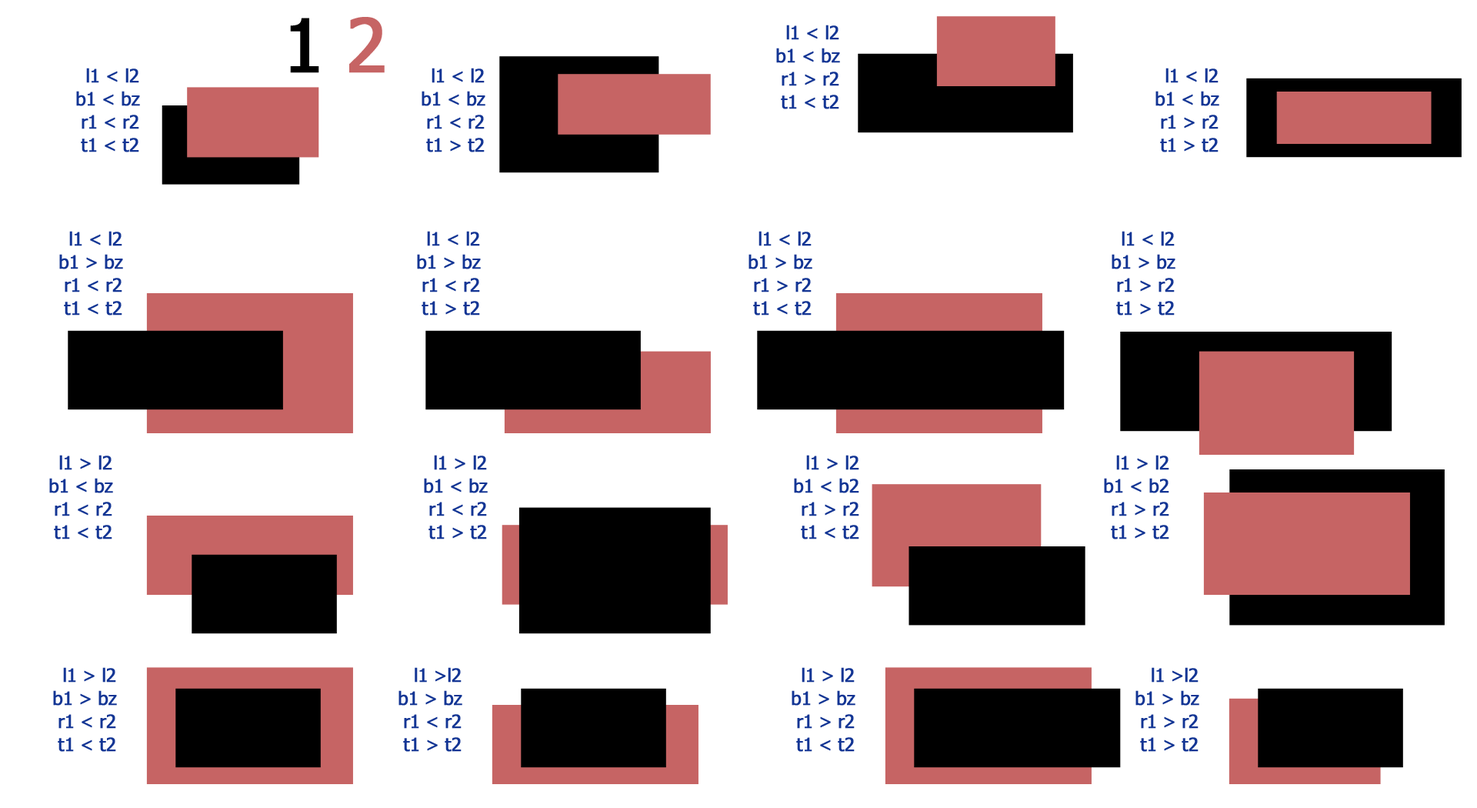
<style>
.page{position:relative;width:1477px;height:808px;background:#ffffff}
.page>*{position:absolute;margin:0}
.t1{font:73.5px "Tahoma";letter-spacing:-0.025em;color:#000000;font-weight:bold}
.t2{font:73.5px "Tahoma";letter-spacing:-0.025em;color:#c66464;font-weight:bold}
.t3{font:18.5px/23.1px "Tahoma";letter-spacing:-0.025em;color:#133594;font-weight:bold}
</style>
<div class="page">
<p class="t1" style="left:290px;top:17px;width:95px;height:56px">1 <span class="t2">2</span></p>
<p class="t3" style="left:776px;top:25px;width:64px;height:84px;text-align:right">l1 &lt; l2<br>b1 &lt; bz<br>r1 &gt; r2<br>t1 &lt; t2</p>
<p class="t3" style="left:76px;top:68px;width:64px;height:84px;text-align:right">l1 &lt; l2<br>b1 &lt; bz<br>r1 &lt; r2<br>t1 &lt; t2</p>
<p class="t3" style="left:421px;top:68px;width:64px;height:84px;text-align:right">l1 &lt; l2<br>b1 &lt; bz<br>r1 &lt; r2<br>t1 &gt; t2</p>
<p class="t3" style="left:1155px;top:68px;width:64px;height:84px;text-align:right">l1 &lt; l2<br>b1 &lt; bz<br>r1 &gt; r2<br>t1 &gt; t2</p>
<p class="t3" style="left:59px;top:231px;width:64px;height:84px;text-align:right">l1 &lt; l2<br>b1 &gt; bz<br>r1 &lt; r2<br>t1 &lt; t2</p>
<p class="t3" style="left:417px;top:231px;width:64px;height:84px;text-align:right">l1 &lt; l2<br>b1 &gt; bz<br>r1 &lt; r2<br>t1 &gt; t2</p>
<p class="t3" style="left:748px;top:231px;width:64px;height:84px;text-align:right">l1 &lt; l2<br>b1 &gt; bz<br>r1 &gt; r2<br>t1 &lt; t2</p>
<p class="t3" style="left:1111px;top:231px;width:64px;height:84px;text-align:right">l1 &lt; l2<br>b1 &gt; bz<br>r1 &gt; r2<br>t1 &gt; t2</p>
<p class="t3" style="left:49px;top:455px;width:64px;height:84px;text-align:right">l1 &gt; l2<br>b1 &lt; bz<br>r1 &lt; r2<br>t1 &lt; t2</p>
<p class="t3" style="left:424px;top:455px;width:64px;height:84px;text-align:right">l1 &gt; l2<br>b1 &lt; bz<br>r1 &lt; r2<br>t1 &gt; t2</p>
<p class="t3" style="left:794px;top:455px;width:65px;height:84px;text-align:right">l1 &gt; l2<br>b1 &lt; b2<br>r1 &gt; r2<br>t1 &lt; t2</p>
<p class="t3" style="left:1104px;top:455px;width:65px;height:84px;text-align:right">l1 &gt; l2<br>b1 &lt; b2<br>r1 &gt; r2<br>t1 &gt; t2</p>
<p class="t3" style="left:53px;top:667px;width:64px;height:84px;text-align:right">l1 &gt; l2<br>b1 &gt; bz<br>r1 &lt; r2<br>t1 &lt; t2</p>
<p class="t3" style="left:398px;top:667px;width:64px;height:84px;text-align:right">l1 &gt;l2<br>b1 &gt; bz<br>r1 &lt; r2<br>t1 &gt; t2</p>
<p class="t3" style="left:791px;top:667px;width:64px;height:84px;text-align:right">l1 &gt; l2<br>b1 &gt; bz<br>r1 &gt; r2<br>t1 &lt; t2</p>
<p class="t3" style="left:1135px;top:667px;width:64px;height:84px;text-align:right">l1 &gt;l2<br>b1 &gt; bz<br>r1 &gt; r2<br>t1 &gt; t2</p>
</div>
